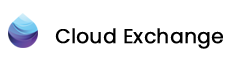
<style>
.page{position:relative;width:239px;height:71px;background:#ffffff}
.page>*{position:absolute;margin:0}
.t1{font:20px "Poppins-Regular";color:#000000;font-weight:bold}
</style>
<div class="page">
<p class="t1" style="left:55px;top:28px;width:168px;height:21px">Cloud Exchange</p>
</div>
